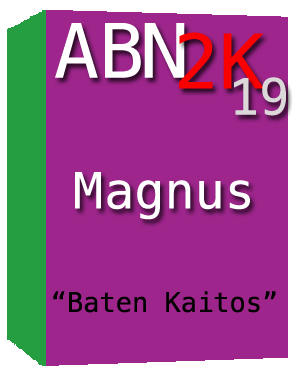
<style>
.page{position:relative;width:300px;height:375px;background:#9d258b}
.page>*{position:absolute;margin:0}
.t1{font:75px "Menlo-Regular";color:#ffffff}
.t2{font:75px "Menlo-Regular";color:#fb0000}
.t3{font:50px "Menlo-Regular";color:#dad8d8}
.t4{font:50px "Menlo-Regular";color:#ffffff}
.t5{font:27px "Menlo-Regular";color:#000000}
</style>
<div class="page">
<p class="t1" style="left:55px;top:23px;width:130px;height:55px">ABN</p>
<p class="t2" style="left:179px;top:32px;width:85px;height:57px">2K</p>
<p class="t3" style="left:234px;top:77px;width:52px;height:39px">19</p>
<p class="t4" style="left:75px;top:172px;width:175px;height:48px">Magnus</p>
<p class="t5" style="left:53px;top:291px;width:223px;height:22px">“Baten Kaitos”</p>
</div>
